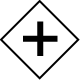
<style>
.page{position:relative;width:80px;height:80px;background:#ffffff}
.page>*{position:absolute;margin:0}
.t1{font:72px "ArialMT";color:#000000}
</style>
<div class="page">
<p class="t1" style="left:23px;top:21px;width:35px;height:35px">+</p>
</div>
